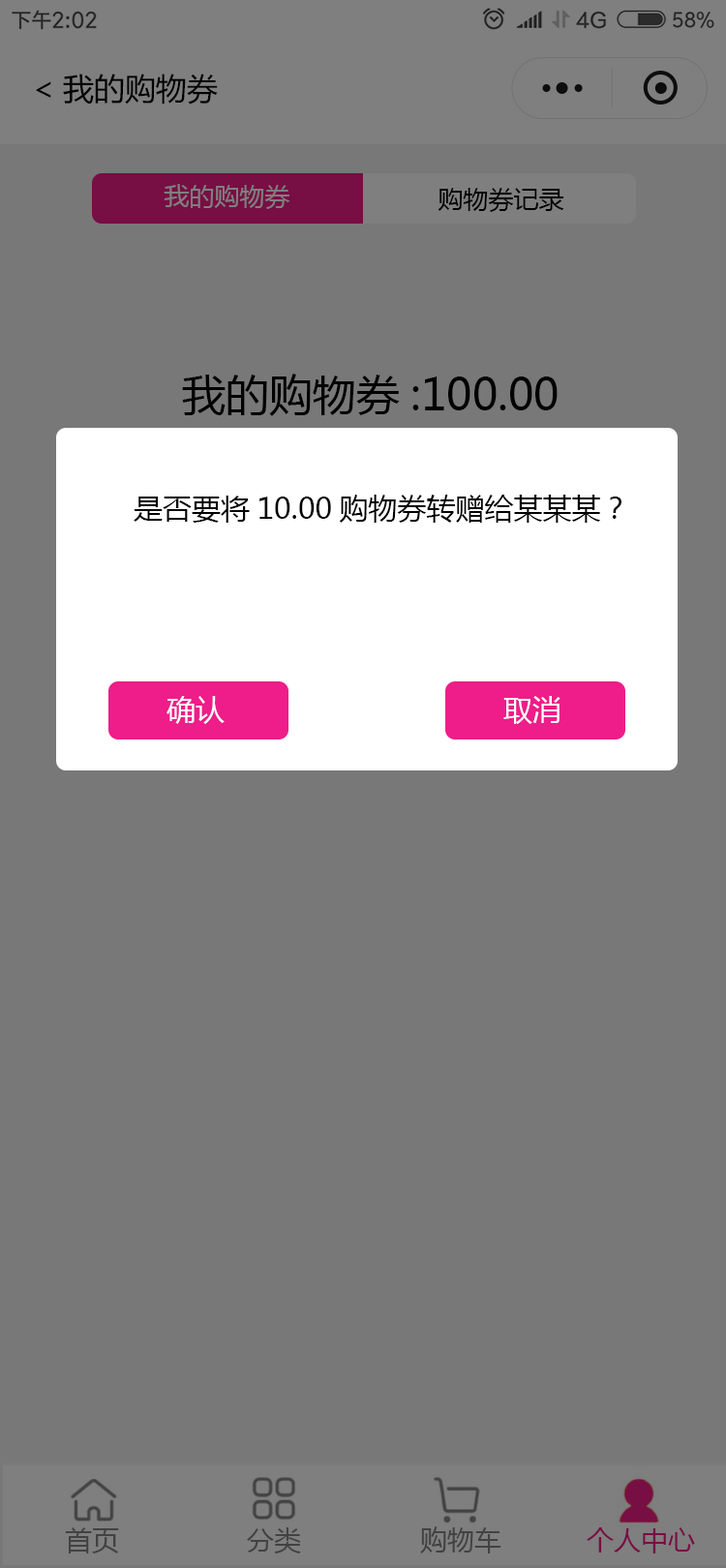
<style>
.page{position:relative;width:726px;height:1568px;background:#787878}
.page>*{position:absolute;margin:0}
.t1{font:31px "MicrosoftYaHei";color:#000000}
.t2{font:25.2px "MicrosoftYaHei";color:#7f7f7f}
.t3{font:25.2px "MicrosoftYaHei";color:#000000}
.t4{font:43.6px "MicrosoftYaHei";color:#000000}
.t5{font:29px "MicrosoftYaHei";color:#000000}
.t6{font:29px "MicrosoftYaHei";color:#ffffff}
</style>
<div class="page">
<p class="t1" style="left:36px;top:74px;width:182px;height:31px">&lt;我的购物券</p>
<p class="t2" style="left:164px;top:184px;width:126px;height:25px">我的购物券</p>
<p class="t3" style="left:437px;top:188px;width:127px;height:24px">购物券记录</p>
<p class="t4" style="left:182px;top:374px;width:376px;height:42px">我的购物券:100.00</p>
<p class="t5" style="left:134px;top:495px;width:487px;height:28px">是否要将10.00购物券转赠给某某某？</p>
<p class="t6" style="left:166px;top:696px;width:59px;height:28px">确认</p>
<p class="t6" style="left:503px;top:696px;width:57px;height:28px">取消</p>
</div>
